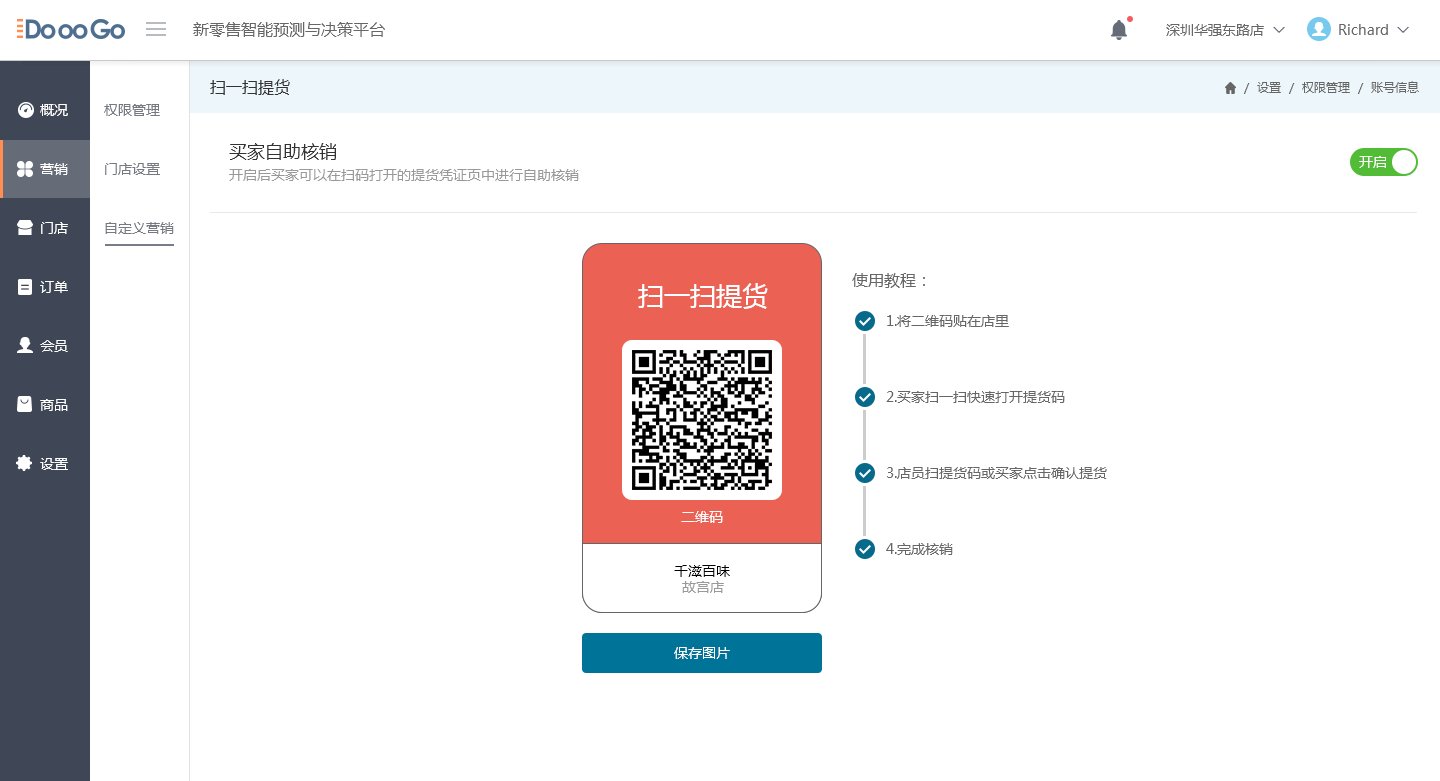
<style>
.page{position:relative;width:1440px;height:781px;background:#ffffff}
.page>*{position:absolute;margin:0}
.t1{font:16px "MicrosoftYaHeiUI";color:#666666}
.t2{font:14px "MicrosoftYaHeiUI";color:#666666}
.t3{font:14px "Marlett";color:#666666}
.t4{font:16px "MicrosoftYaHeiUI";color:#333333}
.t5{font:12px "MicrosoftYaHeiUI";color:#666666}
.t6{font:14px/59px "MicrosoftYaHeiUI";color:#ffffff}
.t7{font:14px/59px "MicrosoftYaHeiUI";color:#747982}
.t8{font:18px "MicrosoftYaHeiUI";color:#333333}
.t9{font:14px "MicrosoftYaHeiUI";color:#ffffff}
.t10{font:14px "MicrosoftYaHeiUI";color:#999999}
.t11{font:26px "MicrosoftYaHeiUI";color:#ffffff}
.t12{font:14px "MicrosoftYaHeiUI";color:#000000}
</style>
<div class="page">
<p class="t1" style="left:193px;top:22px;width:192px;height:15px">新零售智能预测与决策平台</p>
<p class="t2" style="left:1166px;top:24px;width:98px;height:12px">深圳华强东路店</p>
<p class="t2" style="left:1339px;top:24px;width:65px;height:11px">Richard <span class="t3">6</span></p>
<p class="t4" style="left:210px;top:79px;width:80px;height:16px">扫一扫提货</p>
<p class="t5" style="left:1244px;top:81px;width:175px;height:13px">/  设置  /  权限管理  /  账号信息</p>
<p class="t6" style="left:40px;top:104px;width:28px;height:366px">概况<br>营销<br>门店<br>订单<br>会员<br>商品<br>设置</p>
<p class="t7" style="left:104px;top:104px;width:70px;height:130px">权限管理<br>门店设置<br>自定义营销</p>
<p class="t8" style="left:229px;top:143px;width:107px;height:17px">买家自助核销</p>
<p class="t9" style="left:1359px;top:156px;width:27px;height:12px">开启</p>
<p class="t10" style="left:229px;top:169px;width:350px;height:12px">开启后买家可以在扫码打开的提货凭证页中进行自助核销</p>
<p class="t1" style="left:852px;top:273px;width:73px;height:15px">使用教程：</p>
<p class="t11" style="left:638px;top:283px;width:130px;height:26px">扫一扫提货</p>
<p class="t2" style="left:887px;top:315px;width:122px;height:12px">1.将二维码贴在店里</p>
<p class="t2" style="left:886px;top:391px;width:179px;height:12px">2.买家扫一扫快速打开提货码</p>
<p class="t2" style="left:887px;top:467px;width:220px;height:12px">3.店员扫提货码或买家点击确认提货</p>
<p class="t9" style="left:681px;top:511px;width:42px;height:12px">二维码</p>
<p class="t2" style="left:886px;top:543px;width:67px;height:12px">4.完成核销</p>
<p class="t12" style="left:674px;top:565px;width:56px;height:12px">千滋百味</p>
<p class="t10" style="left:682px;top:581px;width:42px;height:12px">故宫店</p>
<p class="t9" style="left:674px;top:647px;width:56px;height:12px">保存图片</p>
</div>
